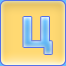
<style>
.page{position:relative;width:66px;height:66px}
.page>*{position:absolute;margin:0}
.t1{font:41px "Tahoma-Bold"}
</style>
<div class="page">
<p class="t1" style="left:23px;top:17px;width:29px;height:37px">Ц</p>
<p class="t1" style="left:23px;top:17px;width:29px;height:37px">Ц</p>
</div>
